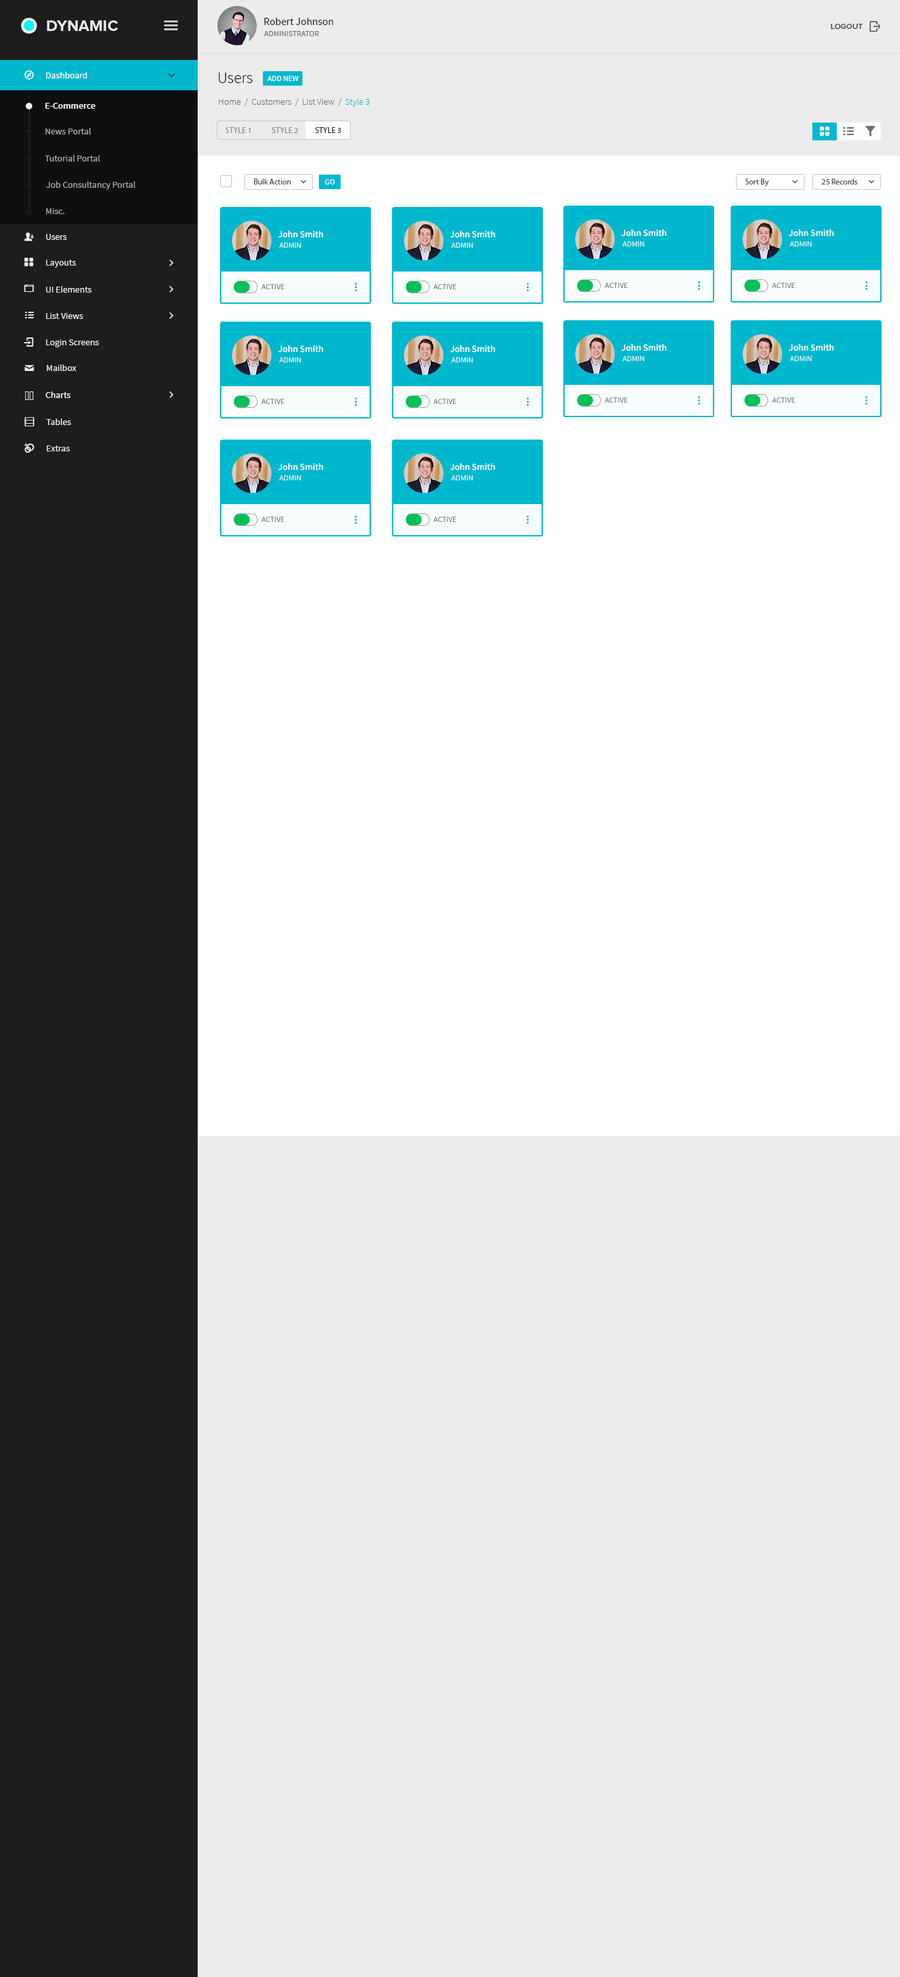
<style>
.page{position:relative;width:900px;height:1977px;background:#ececec}
.page>*{position:absolute;margin:0}
.t1{font:10.5px "SourceSansPro-Regular";color:#1d1d1d}
.t2{font:15.8px "ProximaNova-Bold";color:#eae7e7;text-transform:uppercase}
.t3{font:7.9px "ProximaNova-Semibold";color:#535353;font-variant:small-caps}
.t4{font:7.9px "SourceSansPro-Regular";color:#767575}
.t5{font:9.2px "SourceSansPro-Regular";color:#ffffff}
.t6{font:9.2px "SourceSansPro-Regular";color:#ffffff;font-variant:small-caps}
.t7{font:15.8px "SourceSansPro-Light";color:#010101}
.t8{font:7.9px "SourceSansPro-Regular";color:#ffffff;text-transform:uppercase}
.t9{font:9.2px "SourceSansPro-Light";color:#6d6c6c}
.t10{font:9.2px "SourceSansPro-Light";color:#00b8ce}
.t11{font:9.2px "SourceSansPro-Semibold";color:#ffffff}
.t12{font:9.2px "SourceSansPro-Regular";color:#a6a5a5}
.t13{font:7.9px "MyriadPro-Regular";color:#8f8f8f;text-transform:uppercase}
.t14{font:7.9px "MyriadPro-Regular";color:#8a8a8a;text-transform:uppercase}
.t15{font:7.9px "MyriadPro-Regular";color:#2b2b2b;text-transform:uppercase}
.t16{font:9px "SourceSansPro-Regular";color:#a6a5a5}
.t17{font:7.9px "MyriadPro-Regular";color:#4e4e4e}
.t18{font:9.2px "SourceSansPro-Regular";color:#ebebeb}
.t19{font:7.9px "SourceSansPro-Regular";text-transform:uppercase}
.t20{font:9px "SourceSansPro-Regular";color:#ebebeb}
</style>
<div class="page">
<p class="t1" style="left:264px;top:18px;width:69px;height:7px">Robert Johnson</p>
<p class="t2" style="left:47px;top:20px;width:71px;height:11px">DYNAMIC</p>
<p class="t3" style="left:831px;top:24px;width:32px;height:5px">LOGOUT</p>
<p class="t4" style="left:264px;top:31px;width:55px;height:5px">ADMINISTRATOR</p>
<p class="t5" style="left:46px;top:72px;width:41px;height:6px"><span class="t6">D</span>ashboard</p>
<p class="t7" style="left:219px;top:72px;width:33px;height:11px">Users</p>
<p class="t8" style="left:267px;top:76px;width:31px;height:5px">add new</p>
<p class="t9" style="left:219px;top:98px;width:151px;height:9px">Home  /  Customers  /  List View  /  <span class="t10">Style 3</span></p>
<p class="t11" style="left:45px;top:103px;width:51px;height:6px">E-Commerce</p>
<p class="t12" style="left:45px;top:128px;width:46px;height:6px">News Portal</p>
<p class="t13" style="left:225px;top:127px;width:116px;height:6px">Style 1            <span class="t14">Style 2          </span><span class="t15">Style 3</span></p>
<p class="t16" style="left:45px;top:155px;width:55px;height:6px">Tutorial Portal</p>
<p class="t16" style="left:46px;top:181px;width:90px;height:9px">Job Consultancy Portal</p>
<p class="t17" style="left:254px;top:179px;width:37px;height:5px">Bulk Action</p>
<p class="t8" style="left:325px;top:179px;width:10px;height:5px">go</p>
<p class="t17" style="left:745px;top:179px;width:24px;height:7px">Sort By</p>
<p class="t17" style="left:822px;top:179px;width:36px;height:5px">25 Records</p>
<p class="t16" style="left:46px;top:208px;width:19px;height:6px">Misc.</p>
<p class="t18" style="left:46px;top:234px;width:21px;height:6px">Users</p>
<p class="t11" style="left:278px;top:231px;width:45px;height:7px">John Smith</p>
<p class="t11" style="left:450px;top:231px;width:45px;height:7px">John Smith</p>
<p class="t11" style="left:621px;top:229px;width:46px;height:8px">John Smith</p>
<p class="t11" style="left:789px;top:229px;width:45px;height:8px">John Smith</p>
<p class="t8" style="left:279px;top:242px;width:22px;height:6px">admin</p>
<p class="t8" style="left:451px;top:242px;width:22px;height:6px">admin</p>
<p class="t8" style="left:623px;top:241px;width:21px;height:5px">admin</p>
<p class="t8" style="left:790px;top:241px;width:22px;height:5px">admin</p>
<p class="t18" style="left:46px;top:260px;width:30px;height:7px">Layouts</p>
<p class="t18" style="left:46px;top:286px;width:46px;height:7px">UI Elements</p>
<p class="t19" style="left:262px;top:284px;width:23px;height:5px">active</p>
<p class="t19" style="left:434px;top:284px;width:23px;height:5px">active</p>
<p class="t19" style="left:605px;top:283px;width:23px;height:5px">active</p>
<p class="t19" style="left:772px;top:283px;width:23px;height:5px">active</p>
<p class="t18" style="left:46px;top:313px;width:37px;height:6px">List Views</p>
<p class="t18" style="left:46px;top:339px;width:53px;height:8px">Login Screens</p>
<p class="t11" style="left:278px;top:345px;width:45px;height:7px">John Smith</p>
<p class="t11" style="left:450px;top:345px;width:45px;height:7px">John Smith</p>
<p class="t11" style="left:621px;top:344px;width:46px;height:7px">John Smith</p>
<p class="t11" style="left:789px;top:344px;width:45px;height:7px">John Smith</p>
<p class="t18" style="left:47px;top:364px;width:29px;height:7px">Mailbox</p>
<p class="t8" style="left:279px;top:357px;width:22px;height:5px">admin</p>
<p class="t8" style="left:451px;top:357px;width:22px;height:5px">admin</p>
<p class="t8" style="left:623px;top:356px;width:21px;height:5px">admin</p>
<p class="t8" style="left:790px;top:356px;width:22px;height:5px">admin</p>
<p class="t5" style="left:45px;top:391px;width:25px;height:7px">Charts</p>
<p class="t19" style="left:262px;top:399px;width:23px;height:5px">active</p>
<p class="t19" style="left:434px;top:399px;width:23px;height:5px">active</p>
<p class="t19" style="left:605px;top:397px;width:23px;height:6px">active</p>
<p class="t19" style="left:772px;top:397px;width:23px;height:6px">active</p>
<p class="t20" style="left:46px;top:418px;width:25px;height:7px">Tables</p>
<p class="t20" style="left:47px;top:445px;width:23px;height:6px">Extras</p>
<p class="t11" style="left:278px;top:463px;width:45px;height:7px">John Smith</p>
<p class="t11" style="left:450px;top:463px;width:45px;height:7px">John Smith</p>
<p class="t8" style="left:279px;top:475px;width:22px;height:5px">admin</p>
<p class="t8" style="left:451px;top:475px;width:22px;height:5px">admin</p>
<p class="t19" style="left:262px;top:517px;width:23px;height:5px">active</p>
<p class="t19" style="left:434px;top:517px;width:23px;height:5px">active</p>
</div>
